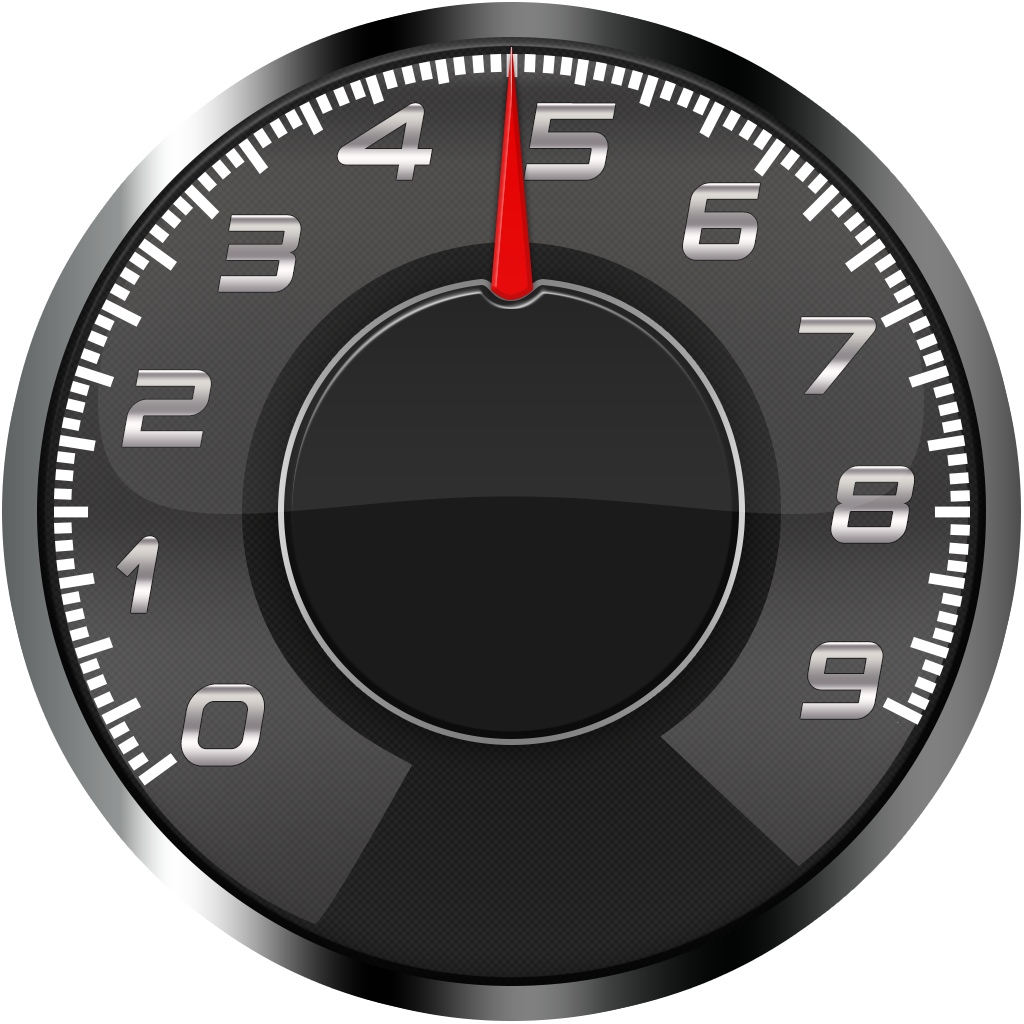
<style>
.page{position:relative;width:1024px;height:1024px;background:#ffffff}
.page>*{position:absolute;margin:0}
.t1{font:105.2px "Planetium-XBoldDemo";letter-spacing:-0.08em;font-style:italic}
.t2{font:105.2px "Planetium-XBoldDemo";letter-spacing:-0.16em;font-style:italic}
.t3{font:111.7px "Planetium-XBoldDemo";letter-spacing:-0.16em;font-style:italic;scale:0.96 1}
</style>
<div class="page">
<p class="t1" style="left:337px;top:103px;width:95px;height:77px">4</p>
<p class="t1" style="left:524px;top:103px;width:92px;height:77px">5</p>
<p class="t1" style="left:683px;top:183px;width:77px;height:77px">6</p>
<p class="t1" style="left:218px;top:215px;width:83px;height:77px">3</p>
<p class="t1" style="left:799px;top:317px;width:77px;height:77px">7</p>
<p class="t1" style="left:122px;top:370px;width:89px;height:77px">2</p>
<p class="t1" style="left:831px;top:466px;width:84px;height:77px">8</p>
<p class="t2" style="left:116px;top:536px;width:43px;height:77px">1</p>
<p class="t1" style="left:800px;top:642px;width:83px;height:77px">9</p>
<p class="t3" style="left:181px;top:684px;width:83px;height:82px">0</p>
</div>
